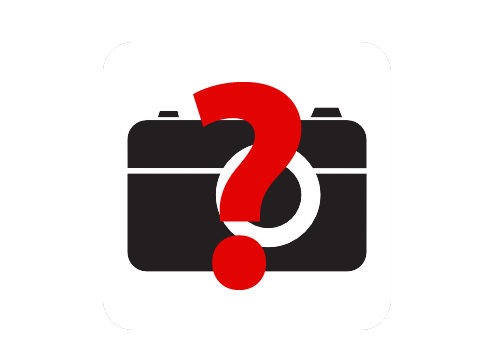
<style>
.page{position:relative;width:480px;height:360px;background:#ffffff}
.page>*{position:absolute;margin:0}
.t1{font:300px "MyriadPro-Bold";color:#e20303}
</style>
<div class="page">
<p class="t1" style="left:193px;top:82px;width:109px;height:208px">?</p>
</div>
